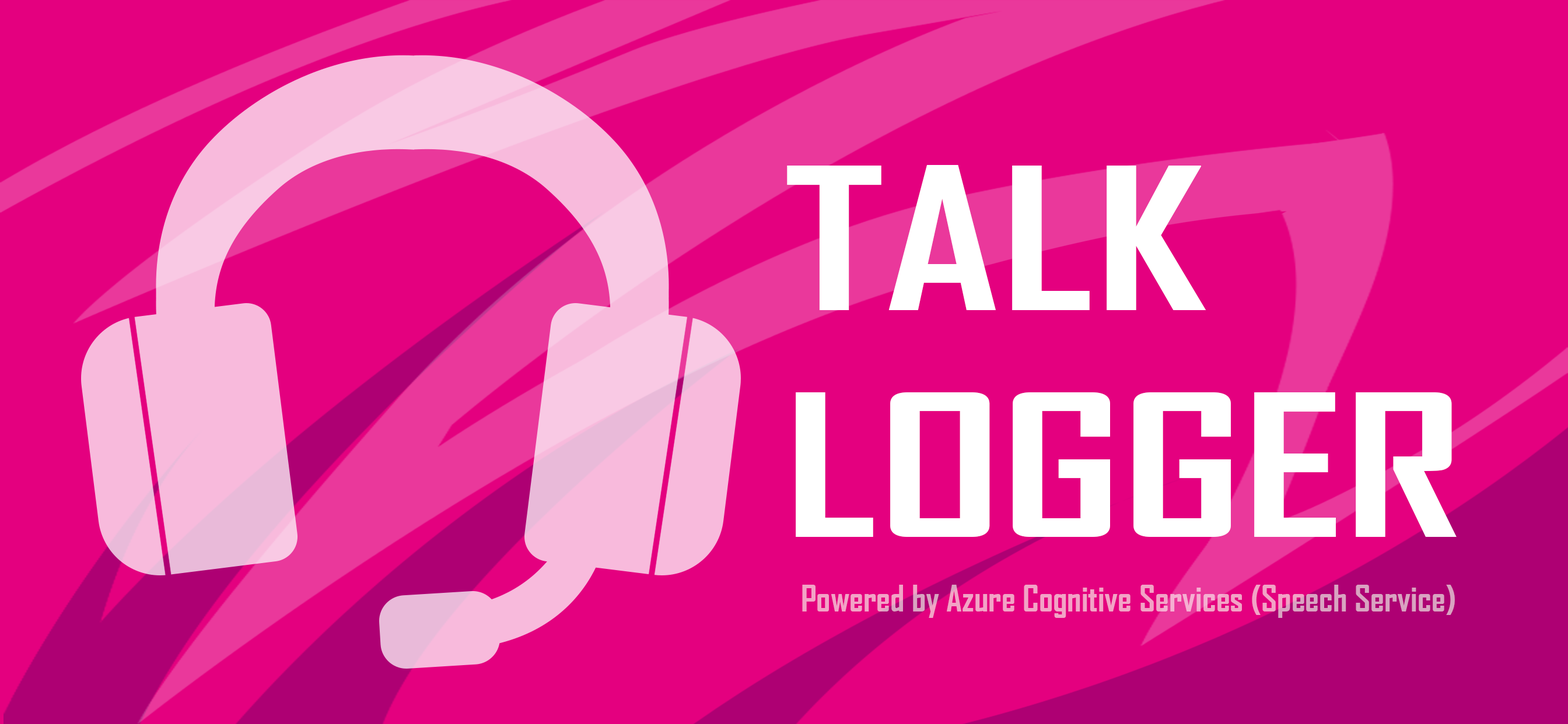
<style>
.page{position:relative;width:1568px;height:724px;background:#e4007f}
.page>*{position:absolute;margin:0}
.t1{font:189.3px "AgencyFB-Bold";color:#ffffff;scale:1.36 1}
.t2{font:34.8px "AgencyFB-Bold"}
</style>
<div class="page">
<p class="t1" style="left:787px;top:165px;width:670px;height:372px">TALK<br>LOGGER</p>
<p class="t2" style="left:802px;top:585px;width:653px;height:33px">Powered by Azure Cognitive Services (Speech Service)</p>
</div>
